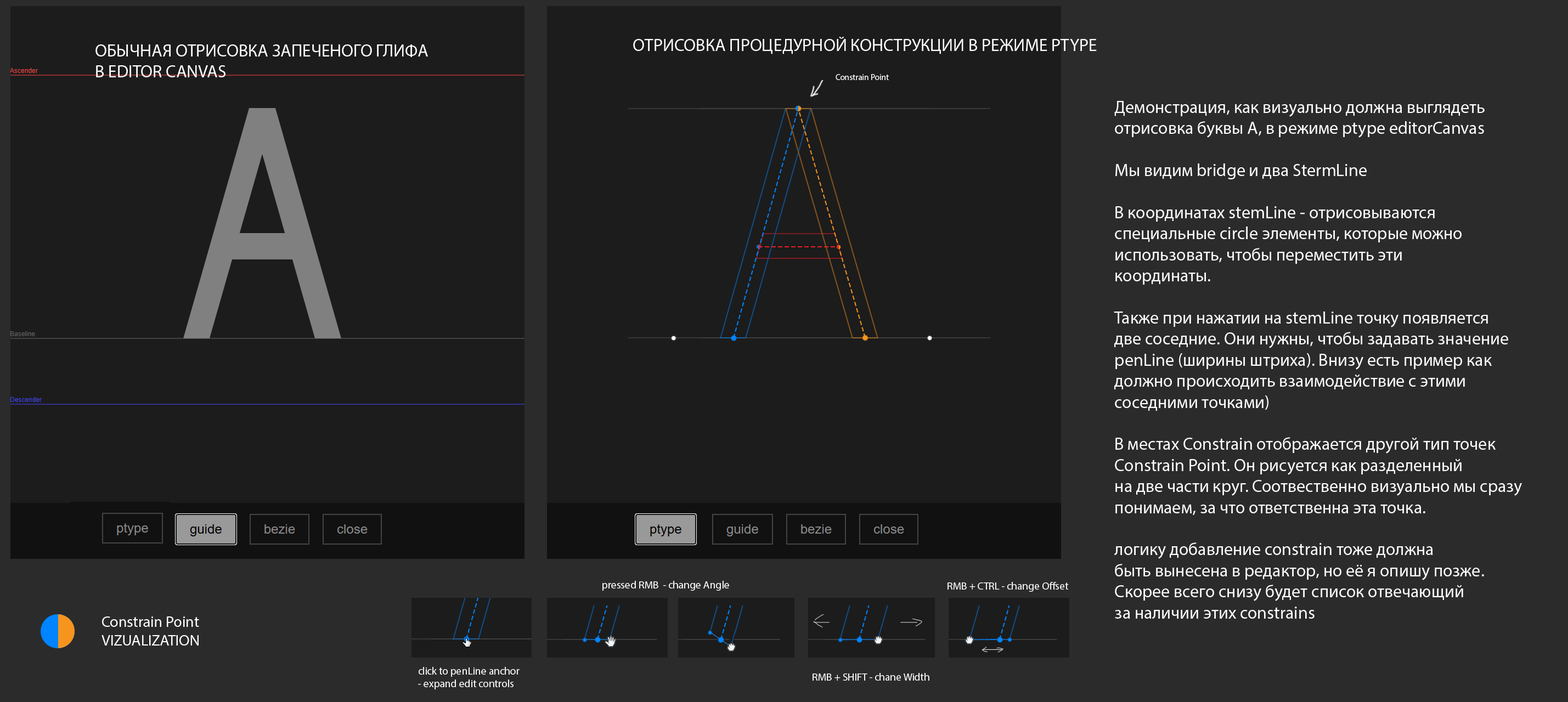
<style>
.page{position:relative;width:1568px;height:702px;background:#1c1c1c}
.page>*{position:absolute;margin:0}
.t1{font:17.6px "MyriadPro-Regular";color:#ffffff}
.t2{font:8.5px "MyriadPro-Regular";color:#ffffff}
.t3{font:10.6px "MyriadPro-Regular";color:#ffffff}
.t4{font:15.5px "MyriadPro-Regular";color:#ffffff}
</style>
<div class="page">
<p class="t1" style="left:633px;top:37px;width:464px;height:17px">ОТРИСОВКА ПРОЦЕДУРНОЙ КОНСТРУКЦИИ В РЕЖИМЕ PTYPE</p>
<p class="t1" style="left:95px;top:44px;width:333px;height:33px">ОБЫЧНАЯ ОТРИСОВКА ЗАПЕЧЕНОГО ГЛИФА <br>В EDITOR CANVAS</p>
<p class="t2" style="left:836px;top:74px;width:53px;height:6px">Constrain Point</p>
<p class="t1" style="left:1114px;top:101px;width:408px;height:518px">Демонстрация, как визуально должна выглядеть<br>отрисовка буквы А, в режиме ptype editorCanvas<br><br>Мы видим bridge и два StermLine<br><br>В координатах stemLine - отрисовываются<br>специальные circle элементы, которые можно <br>использовать, чтобы переместить эти <br>координаты. <br><br>Также при нажатии на stemLine точку появляется<br>две соседние. Они нужны, чтобы задавать значение <br>penLine (ширины штриха). Внизу есть пример как<br>должно происходить взаимодействие с этими<br>соседними точками)<br><br>В местах Constrain отображается другой тип точек<br>Constrain Point. Он рисуется как разделенный<br>на две части круг. Соотвественно визуально мы сразу<br>понимаем, за что ответственна эта точка.<br><br>логику добавление constrain тоже должна<br>быть вынесена в редактор, но её я опишу позже.<br>Скорее всего снизу будет список отвечающий<br>за наличии этих constrains</p>
<p class="t3" style="left:602px;top:581px;width:127px;height:10px">pressed RMB  - сhange Angle</p>
<p class="t3" style="left:947px;top:582px;width:122px;height:10px">RMB + CTRL - change Offset</p>
<p class="t4" style="left:101px;top:617px;width:98px;height:29px">Constrain Point<br>VIZUALIZATION</p>
<p class="t3" style="left:418px;top:667px;width:102px;height:23px">click to penLine anchor <br>- expand edit controls</p>
<p class="t3" style="left:813px;top:673px;width:116px;height:8px">RMB + SHIFT - сhane Width</p>
</div>
